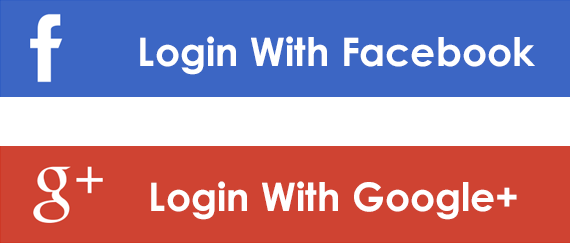
<style>
.page{position:relative;width:570px;height:243px;background:#3c66c4}
.page>*{position:absolute;margin:0}
.t1{font:39.3px "CenturyGothic-Bold";color:#ffffff}
</style>
<div class="page">
<p class="t1" style="left:140px;top:36px;width:395px;height:39px">Login With Facebook</p>
<p class="t1" style="left:151px;top:181px;width:366px;height:39px">Login With Google+</p>
</div>
